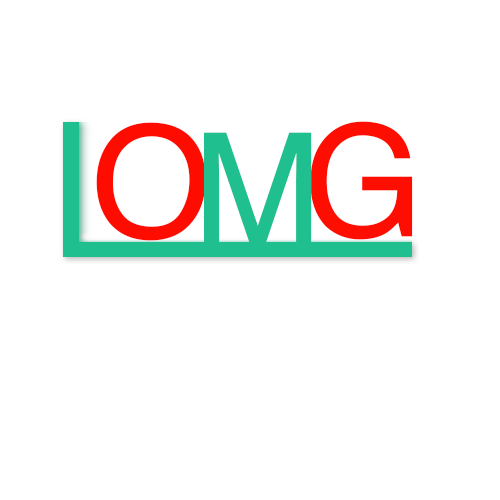
<style>
.page{position:relative;width:500px;height:500px;background:#ffffff}
.page>*{position:absolute;margin:0}
.t1{font:154.1px "Helvetica";color:#ff0c00;font-weight:bold}
.t2{font:154.1px "Helvetica";color:#fe0d01;font-weight:bold}
.t3{font:154.1px "Helvetica";color:#1fbf8f;font-weight:bold}
</style>
<div class="page">
<p class="t1" style="left:96px;top:122px;width:110px;height:119px">O</p>
<p class="t2" style="left:310px;top:121px;width:103px;height:119px">G</p>
<p class="t3" style="left:204px;top:132px;width:108px;height:113px">M</p>
</div>
